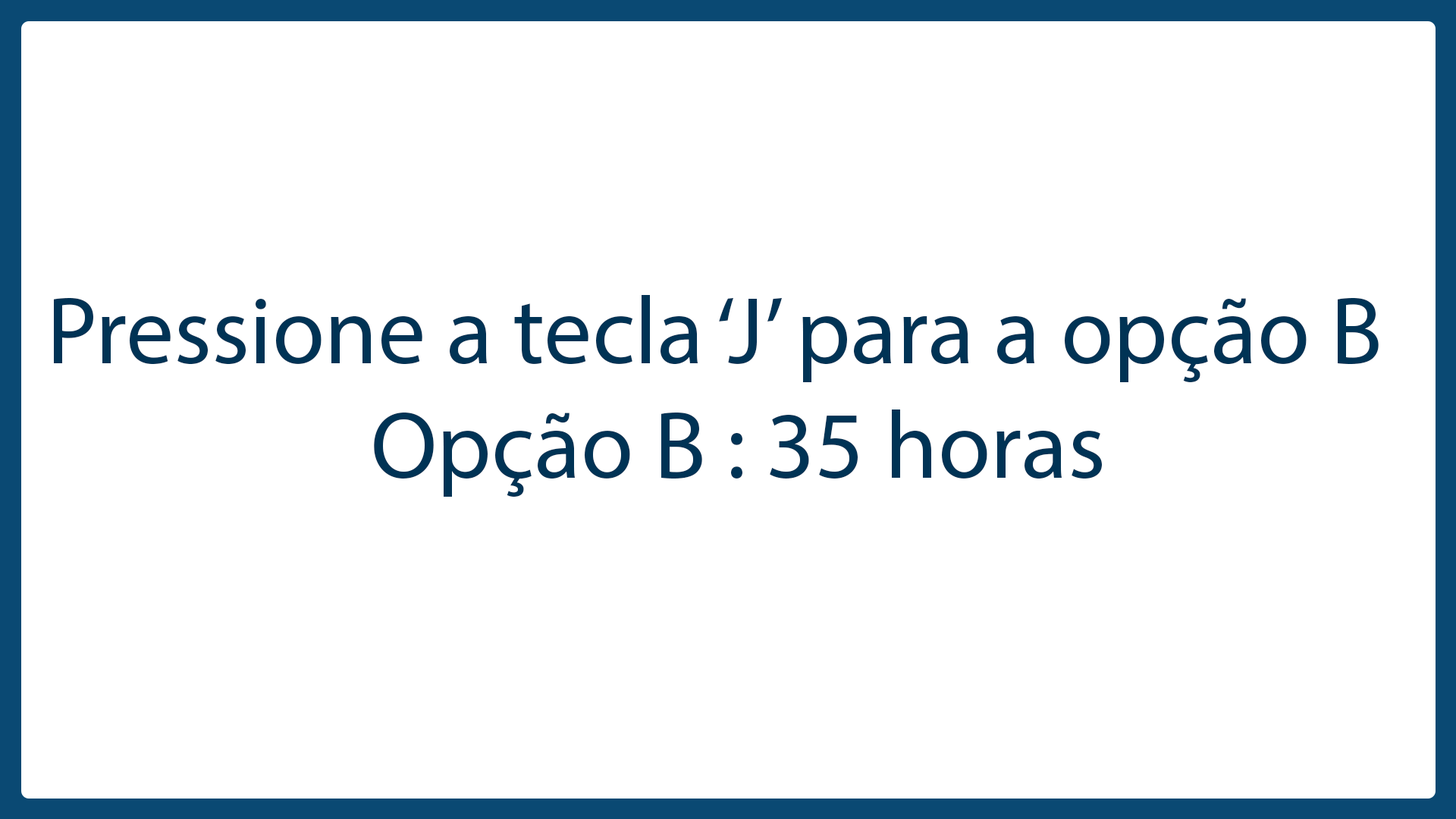
<style>
.page{position:relative;width:1456px;height:819px;background:#ffffff}
.page>*{position:absolute;margin:0}
.t1{font:95.9px "MyriadPro-Regular";color:#003355}
</style>
<div class="page">
<p class="t1" style="left:54px;top:295px;width:1325px;height:202px">Pressione a tecla ‘J’ para a opção B<br>                Opção B : 35 horas</p>
</div>
